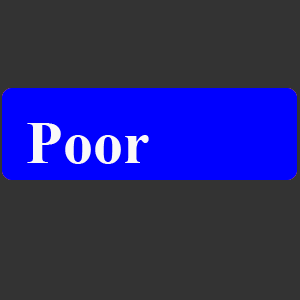
<style>
.page{position:relative;width:300px;height:300px;background:#333333}
.page>*{position:absolute;margin:0}
.t1{font:60px "TimesNewRomanPS-BoldMT";color:#faf8f8}
</style>
<div class="page">
<p class="t1" style="left:27px;top:123px;width:122px;height:41px">Poor</p>
</div>
